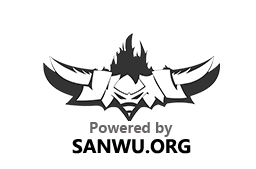
<style>
.page{position:relative;width:256px;height:169px;background:#ffffff}
.page>*{position:absolute;margin:0}
.t1{font:14px "MicrosoftYaHei-Bold";color:#6a6565}
.t2{font:18px "MicrosoftYaHei-Bold";color:#000000}
</style>
<div class="page">
<p class="t1" style="left:90px;top:122px;width:83px;height:15px">Powered by</p>
<p class="t2" style="left:72px;top:139px;width:119px;height:15px">SANWU.ORG</p>
</div>
